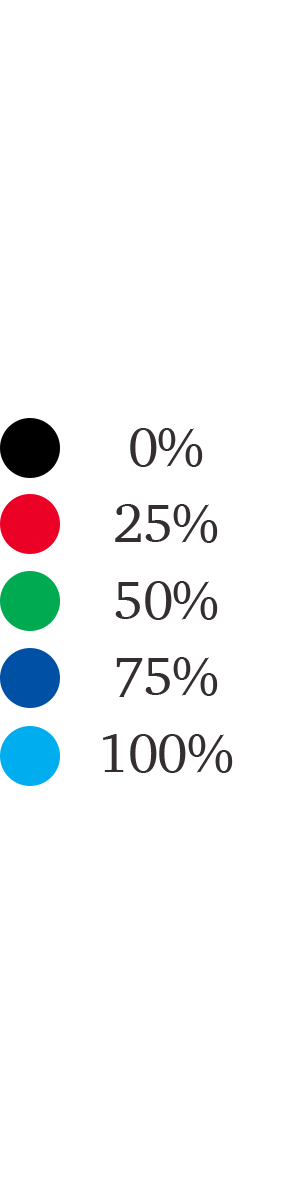
<style>
.page{position:relative;width:300px;height:1200px;background:#ffffff}
.page>*{position:absolute;margin:0}
.t1{font:55.1px "Charter-Roman";letter-spacing:-0.02em;color:#352e31}
</style>
<div class="page">
<p class="t1" style="left:130px;top:428px;width:73px;height:39px">0%</p>
<p class="t1" style="left:115px;top:504px;width:103px;height:39px">25%</p>
<p class="t1" style="left:115px;top:581px;width:103px;height:39px">50%</p>
<p class="t1" style="left:116px;top:657px;width:102px;height:40px">75%</p>
<p class="t1" style="left:103px;top:734px;width:130px;height:39px">100%</p>
</div>
